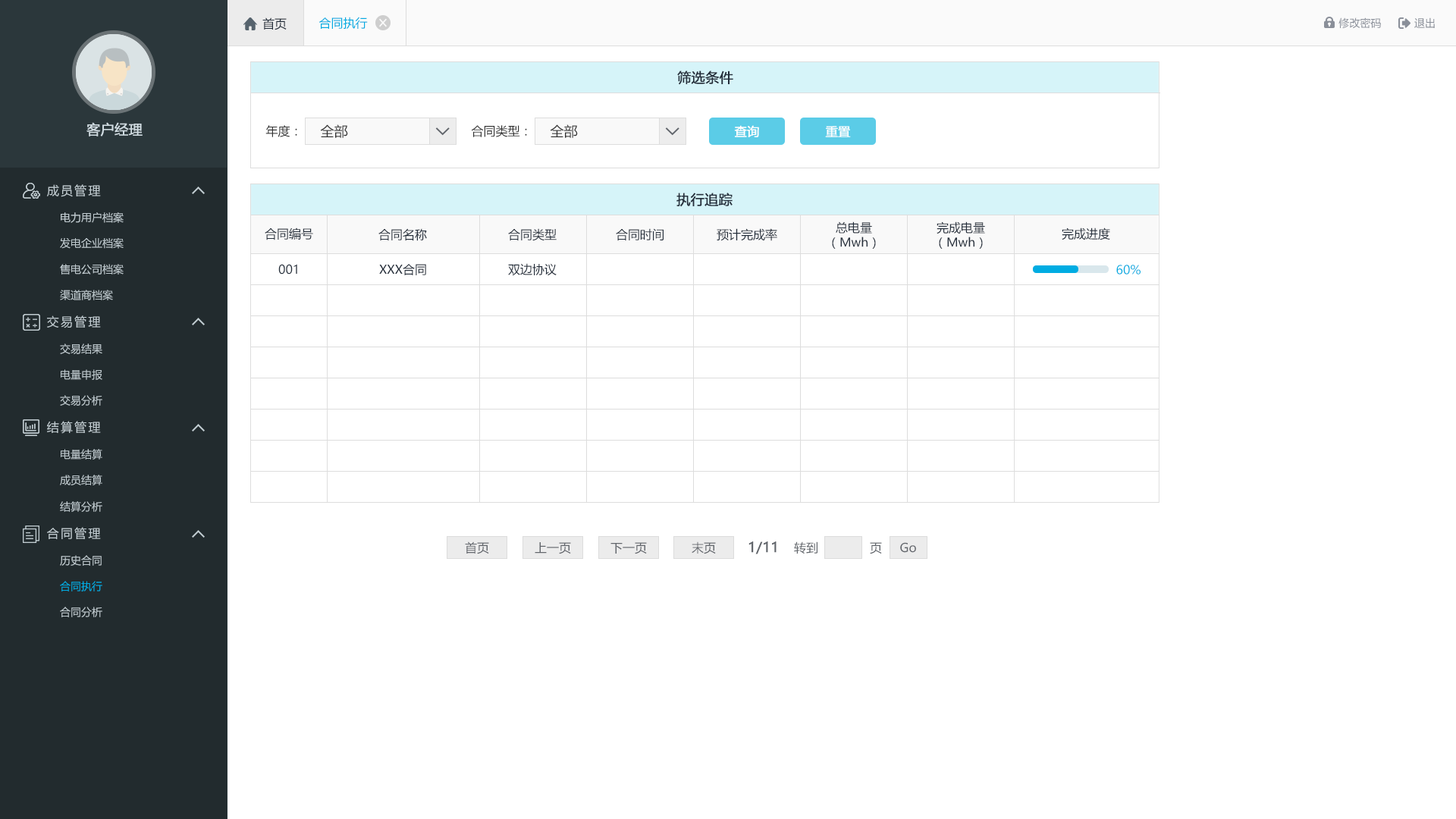
<style>
.page{position:relative;width:1456px;height:819px;background:#ffffff}
.page>*{position:absolute;margin:0}
.t1{font:12.1px "MicrosoftYaHei";color:#242e3b}
.t2{font:12.1px "MicrosoftYaHei";color:#00ace2}
.t3{font:10.6px "MicrosoftYaHei";color:#8a8f99}
.t4{font:13.6px "MicrosoftYaHei";color:#242e3b;font-weight:bold}
.t5{font:13.6px "MicrosoftYaHei";color:#d1dce2;font-weight:bold}
.t6{font:12.1px "MicrosoftYaHei";color:#333333}
.t7{font:13.6px "MicrosoftYaHei";color:#333333}
.t8{font:12.1px "MicrosoftYaHei";color:#ffffff;font-weight:bold}
.t9{font:12.1px "MicrosoftYaHei";letter-spacing:0.14em;color:#c2cdd2}
.t10{font:10.6px "MicrosoftYaHei";color:#c2cdd2}
.t11{font:12.1px "MicrosoftYaHei";color:#61656b}
.t12{font:13.6px "MicrosoftYaHei";color:#61656b;font-weight:bold}
.t13{font:10.6px "MicrosoftYaHei";color:#00ace2}
</style>
<div class="page">
<p class="t1" style="left:262px;top:17px;width:25px;height:13px">首页</p>
<p class="t2" style="left:318px;top:17px;width:50px;height:12px">合同执行</p>
<p class="t3" style="left:1338px;top:17px;width:43px;height:12px">修改密码</p>
<p class="t3" style="left:1414px;top:17px;width:21px;height:11px">退出</p>
<p class="t4" style="left:677px;top:71px;width:56px;height:14px">筛选条件</p>
<p class="t5" style="left:86px;top:122px;width:57px;height:14px">客户经理</p>
<p class="t6" style="left:265px;top:125px;width:32px;height:12px">年度：</p>
<p class="t7" style="left:320px;top:124px;width:28px;height:14px">全部</p>
<p class="t6" style="left:471px;top:125px;width:56px;height:12px">合同类型：</p>
<p class="t7" style="left:550px;top:124px;width:28px;height:14px">全部</p>
<p class="t8" style="left:734px;top:125px;width:25px;height:12px">查询</p>
<p class="t8" style="left:825px;top:126px;width:26px;height:11px">重置</p>
<p class="t9" style="left:47px;top:184px;width:54px;height:13px">成员管理</p>
<p class="t4" style="left:676px;top:193px;width:57px;height:14px">执行追踪</p>
<p class="t10" style="left:61px;top:212px;width:63px;height:11px">电力用户档案</p>
<p class="t1" style="left:832px;top:221px;width:44px;height:28px;text-align:center">总电量<br>（Mwh）</p>
<p class="t1" style="left:937px;top:221px;width:48px;height:28px;text-align:center">完成电量<br>（Mwh）</p>
<p class="t1" style="left:265px;top:227px;width:48px;height:13px">合同编号</p>
<p class="t1" style="left:378px;top:228px;width:49px;height:13px">合同名称</p>
<p class="t1" style="left:508px;top:228px;width:49px;height:13px">合同类型</p>
<p class="t1" style="left:616px;top:228px;width:48px;height:13px">合同时间</p>
<p class="t1" style="left:717px;top:228px;width:60px;height:13px">预计完成率</p>
<p class="t1" style="left:1062px;top:227px;width:48px;height:13px">完成进度</p>
<p class="t10" style="left:60px;top:237px;width:64px;height:12px">发电企业档案</p>
<p class="t10" style="left:60px;top:264px;width:64px;height:11px">售电公司档案</p>
<p class="t1" style="left:278px;top:264px;width:19px;height:11px">001</p>
<p class="t1" style="left:379px;top:264px;width:47px;height:11px">XXX合同</p>
<p class="t1" style="left:508px;top:263px;width:49px;height:13px">双边协议</p>
<p class="t2" style="left:1116px;top:265px;width:25px;height:10px">60%</p>
<p class="t10" style="left:60px;top:290px;width:53px;height:10px">渠道商档案</p>
<p class="t9" style="left:47px;top:315px;width:54px;height:13px">交易管理</p>
<p class="t10" style="left:60px;top:344px;width:42px;height:10px">交易结果</p>
<p class="t10" style="left:61px;top:369px;width:41px;height:11px">电量申报</p>
<p class="t10" style="left:60px;top:395px;width:42px;height:11px">交易分析</p>
<p class="t9" style="left:47px;top:421px;width:54px;height:13px">结算管理</p>
<p class="t10" style="left:61px;top:449px;width:41px;height:11px">电量结算</p>
<p class="t10" style="left:60px;top:475px;width:42px;height:10px">成员结算</p>
<p class="t10" style="left:60px;top:501px;width:42px;height:11px">结算分析</p>
<p class="t9" style="left:47px;top:527px;width:54px;height:12px">合同管理</p>
<p class="t11" style="left:465px;top:541px;width:24px;height:13px">首页</p>
<p class="t11" style="left:535px;top:542px;width:36px;height:12px">上一页</p>
<p class="t11" style="left:610px;top:542px;width:37px;height:12px">下一页</p>
<p class="t11" style="left:692px;top:541px;width:24px;height:13px">末页</p>
<p class="t12" style="left:748px;top:541px;width:29px;height:13px">1/11</p>
<p class="t11" style="left:794px;top:541px;width:23px;height:13px">转到</p>
<p class="t11" style="left:870px;top:542px;width:12px;height:12px">页</p>
<p class="t11" style="left:900px;top:542px;width:16px;height:11px">Go</p>
<p class="t10" style="left:60px;top:555px;width:42px;height:11px">历史合同</p>
<p class="t13" style="left:60px;top:581px;width:42px;height:10px">合同执行</p>
<p class="t10" style="left:60px;top:607px;width:42px;height:10px">合同分析</p>
</div>
